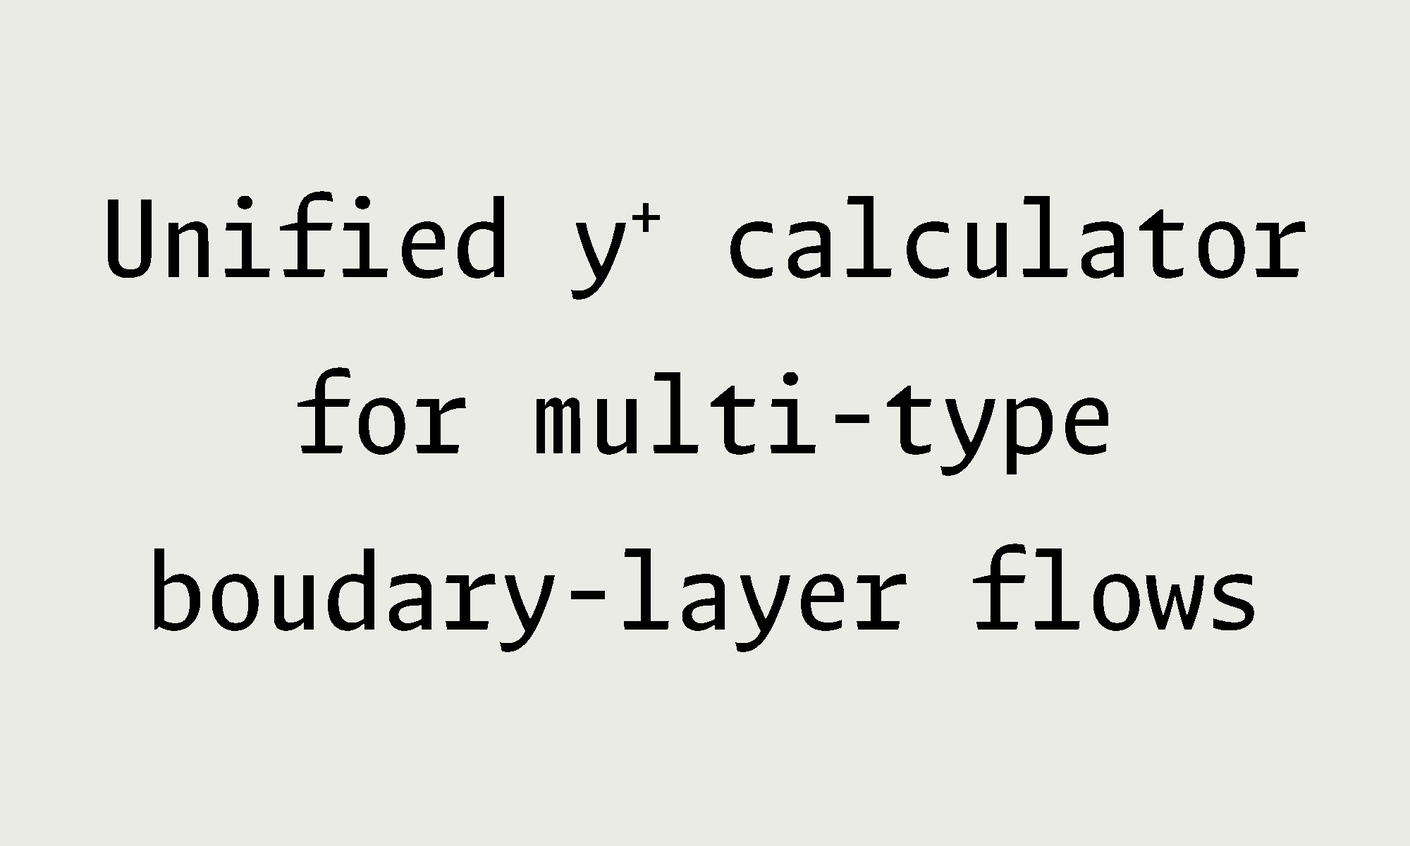
<style>
.page{position:relative;width:1410px;height:846px;background:#eaebe5}
.page>*{position:absolute;margin:0}
.t1{font:117.5px/176.2px "LXGWBrightCode-Regular";color:#000000}
</style>
<div class="page">
<p class="t1" style="left:108px;top:191px;width:1197px;height:461px;text-align:center">Unified y+ calculator<br>for multi-type<br>boudary-layer flows</p>
</div>
